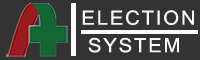
<style>
.page{position:relative;width:200px;height:60px;background:#333333}
.page>*{position:absolute;margin:0}
.t1{font:21.3px "Gautami";letter-spacing:0.08em;color:#faf7f7;scale:1.04 1}
</style>
<div class="page">
<p class="t1" style="left:82px;top:10px;width:112px;height:15px">ELECTION</p>
<p class="t1" style="left:88px;top:37px;width:91px;height:16px">SYSTEM</p>
</div>
